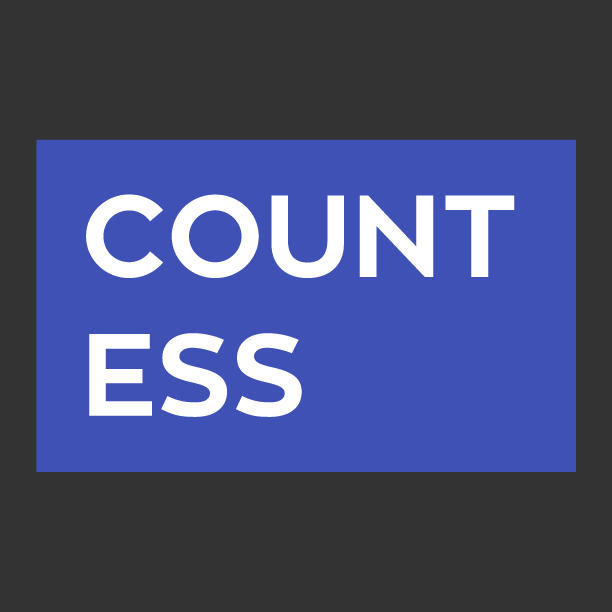
<style>
.page{position:relative;width:612px;height:612px;background:#333333}
.page>*{position:absolute;margin:0}
.t1{font:115.6px "ZonaPro-Bold";color:#ffffff}
</style>
<div class="page">
<p class="t1" style="left:86px;top:194px;width:429px;height:223px">COUNT<br>ESS</p>
</div>
